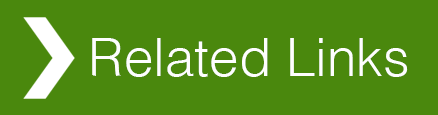
<style>
.page{position:relative;width:438px;height:115px;background:#4a880d}
.page>*{position:absolute;margin:0}
.t1{font:53px "Helvetica-Light";color:#fefefe}
</style>
<div class="page">
<p class="t1" style="left:92px;top:38px;width:316px;height:39px">Related Links</p>
</div>
